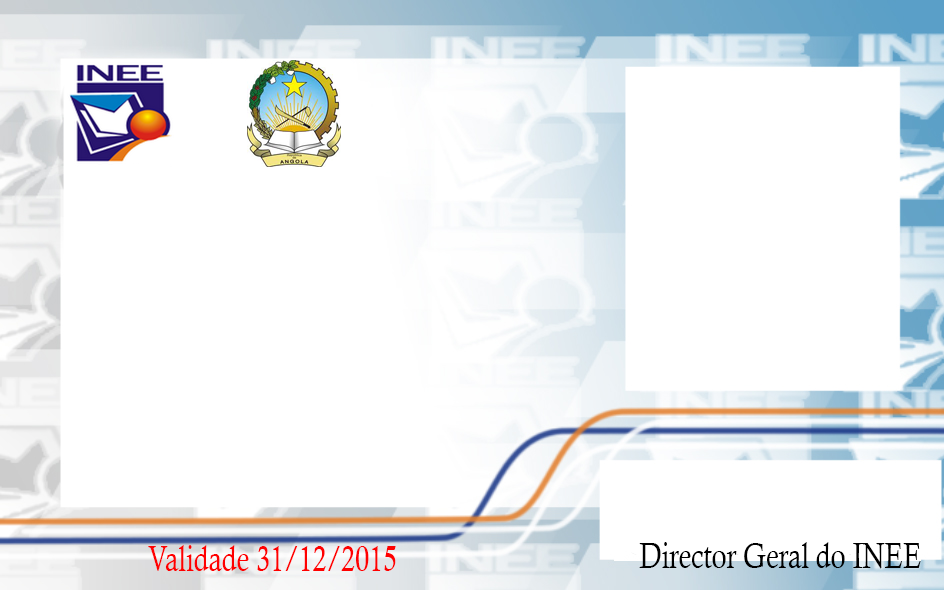
<style>
.page{position:relative;width:944px;height:590px;background:#ffffff}
.page>*{position:absolute;margin:0}
.t1{font:36.2px "CalistoMT";letter-spacing:-0.01em;color:#ff0000;scale:0.77 1}
.t2{font:36.2px "CalistoMT";letter-spacing:-0.01em;color:#000000;scale:0.77 1}
</style>
<div class="page">
<p class="t1" style="left:148px;top:545px;width:248px;height:26px">Validade 31/12/2015</p>
<p class="t2" style="left:639px;top:542px;width:282px;height:27px">Director Geral do INEE</p>
</div>
